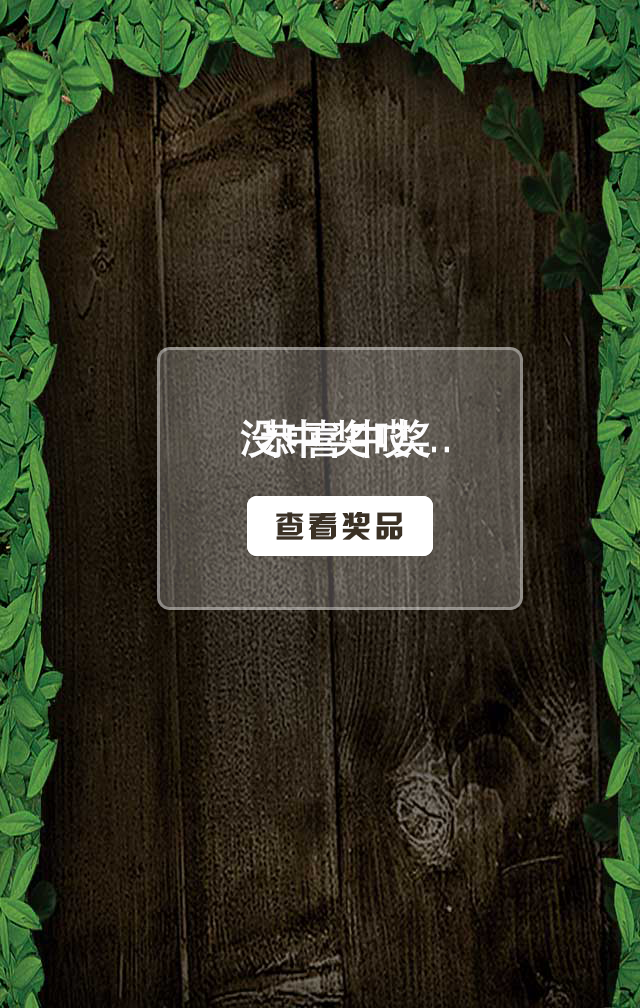
<style>
.page{position:relative;width:640px;height:1008px}
.page>*{position:absolute;margin:0}
.t1{font:40px "SIL-Hei-Med-Jian";letter-spacing:0.08em;color:#fcfbfc;font-weight:bold}
.t2{font:30px "HYk2gj";letter-spacing:0.08em;color:#3b3125;font-weight:bold}
</style>
<div class="page">
<p class="t1" style="left:240px;top:418px;width:209px;height:40px">没中奖哎...</p>
<p class="t1" style="left:259px;top:419px;width:172px;height:39px">恭喜中奖</p>
<p class="t2" style="left:276px;top:512px;width:128px;height:29px">继续来过</p>
<p class="t2" style="left:276px;top:512px;width:127px;height:28px">查看奖品</p>
</div>
